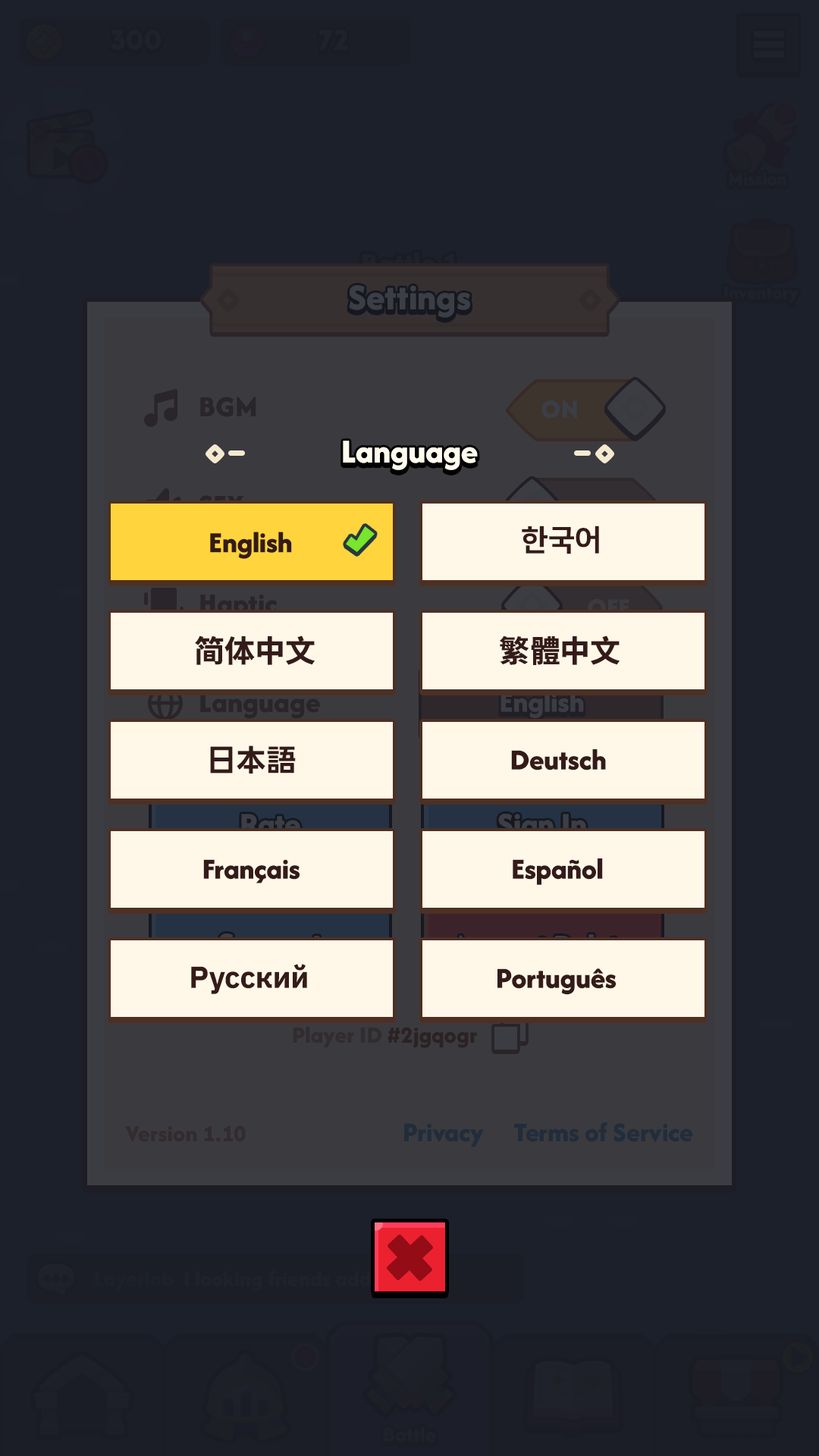
<style>
.page{position:relative;width:819px;height:1456px;background:#1c202b}
.page>*{position:absolute;margin:0}
.t1{font:34.9px "AfacadFlux-ExtraBold";color:#fffcee}
.t2{font:30.3px "AfacadFlux-ExtraBold";color:#341b19}
.t3{font:30.3px "NanumHumanOTFExtraBold";color:#341b19}
.t4{font:30.3px "NotoSansSC-ExtraBold";color:#341b19}
.t5{font:30.3px "LINESeedJPApp_TTF-Bold";color:#341b19}
.t6{font:30.3px "IBMPlexSans-Bold";color:#341b19}
</style>
<div class="page">
<p class="t1" style="left:343px;top:441px;width:135px;height:29px">Language</p>
<p class="t2" style="left:210px;top:532px;width:82px;height:27px">English</p>
<p class="t3" style="left:522px;top:526px;width:77px;height:28px">한국어</p>
<p class="t4" style="left:195px;top:635px;width:120px;height:30px">简体中文</p>
<p class="t4" style="left:499px;top:635px;width:121px;height:30px">繁體中文</p>
<p class="t5" style="left:210px;top:745px;width:86px;height:28px">日本語</p>
<p class="t2" style="left:511px;top:749px;width:95px;height:21px">Deutsch</p>
<p class="t2" style="left:203px;top:859px;width:97px;height:24px">Français</p>
<p class="t2" style="left:513px;top:858px;width:90px;height:27px">Español</p>
<p class="t6" style="left:191px;top:964px;width:116px;height:30px">Русский</p>
<p class="t2" style="left:497px;top:968px;width:119px;height:27px">Português</p>
</div>
